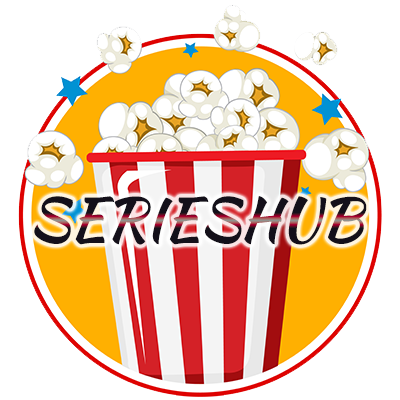
<style>
.page{position:relative;width:400px;height:400px;background:#ffffff}
.page>*{position:absolute;margin:0}
.t1{font:58.3px "KaushanScript-Regular"}
</style>
<div class="page">
<p class="t1" style="left:34px;top:196px;width:333px;height:49px">SERIESHUB</p>
</div>
